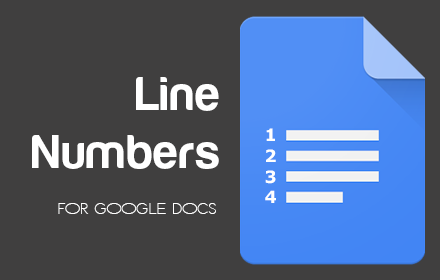
<style>
.page{position:relative;width:440px;height:280px;background:#403f3f}
.page>*{position:absolute;margin:0}
.t1{font:48px "HarabaraMaisBold-HarabaraMaisBold";color:#ffffff}
.t2{font:17px "Verdana-Bold";color:#ffffff}
.t3{font:18px "ETHLarge-ExpandedRegular";color:#ffffff}
</style>
<div class="page">
<p class="t1" style="left:32px;top:77px;width:187px;height:92px;text-align:right">Line<br>Numbers</p>
<p class="t2" style="left:266px;top:128px;width:9px;height:13px">1</p>
<p class="t2" style="left:266px;top:149px;width:10px;height:13px">2</p>
<p class="t2" style="left:265px;top:170px;width:11px;height:14px">3</p>
<p class="t2" style="left:265px;top:190px;width:11px;height:13px">4</p>
<p class="t3" style="left:58px;top:203px;width:158px;height:11px">For Google Docs</p>
</div>
